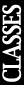
<style>
.page{position:relative;width:24px;height:85px;background:#000000}
.page>*{position:absolute;margin:0}
.t1{font:24.5px "LucidaBright-Demi";letter-spacing:-0.03em;color:#ffffff;scale:0.76 1}
</style>
<div class="page">
<p class="t1" style="left:2px;top:4px;width:20px;height:78px;rotate:-90deg">CLASSES</p>
</div>
